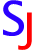
<style>
.page{position:relative;width:50px;height:50px;background:#ffffff}
.page>*{position:absolute;margin:0}
.t1{font:46.8px "LucidaSans";color:#2a00fe}
.t2{font:42.8px "LucidaSans";color:#ff0000}
</style>
<div class="page">
<p class="t1" style="left:3px;top:0px;width:21px;height:36px">S</p>
<p class="t2" style="left:18px;top:12px;width:14px;height:38px">J</p>
</div>
